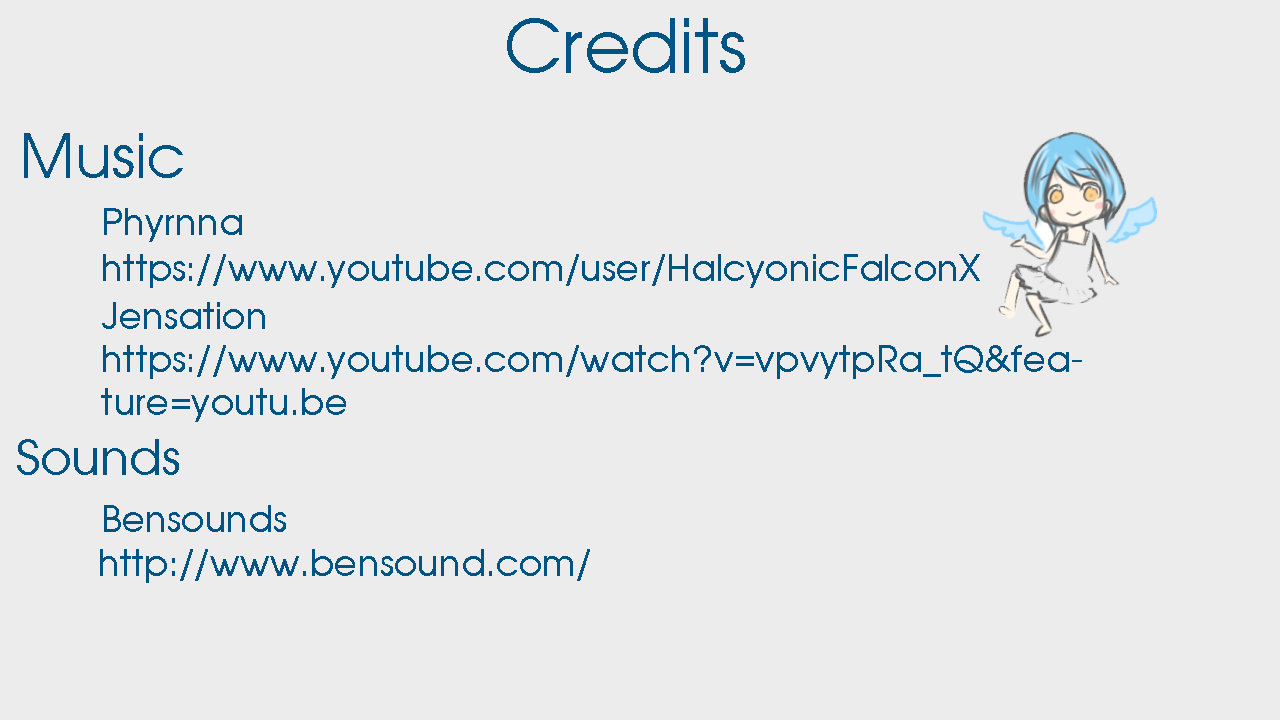
<style>
.page{position:relative;width:1280px;height:720px;background:#ececec}
.page>*{position:absolute;margin:0}
.t1{font:72px "TRAvalonPlain";color:#005484}
.t2{font:60px "TRAvalonPlain";color:#005484}
.t3{font:36px "TRAvalonPlain";color:#005484}
.t4{font:48px "TRAvalonPlain";color:#005484}
</style>
<div class="page">
<p class="t1" style="left:507px;top:18px;width:238px;height:55px">Credits</p>
<p class="t2" style="left:24px;top:133px;width:159px;height:45px">Music</p>
<p class="t3" style="left:104px;top:208px;width:138px;height:34px">Phyrnna</p>
<p class="t3" style="left:103px;top:254px;width:877px;height:34px">https://www.youtube.com/user/HalcyonicFalconX</p>
<p class="t3" style="left:101px;top:302px;width:981px;height:120px">Jensation<br>https://www.youtube.com/watch?v=vpvytpRa_tQ&amp;feature=youtu.be</p>
<p class="t3" style="left:17px;top:439px;width:573px;height:144px"><span class="t4">Sounds<br>   </span>Bensounds<br>   http://www.bensound.com/</p>
</div>
